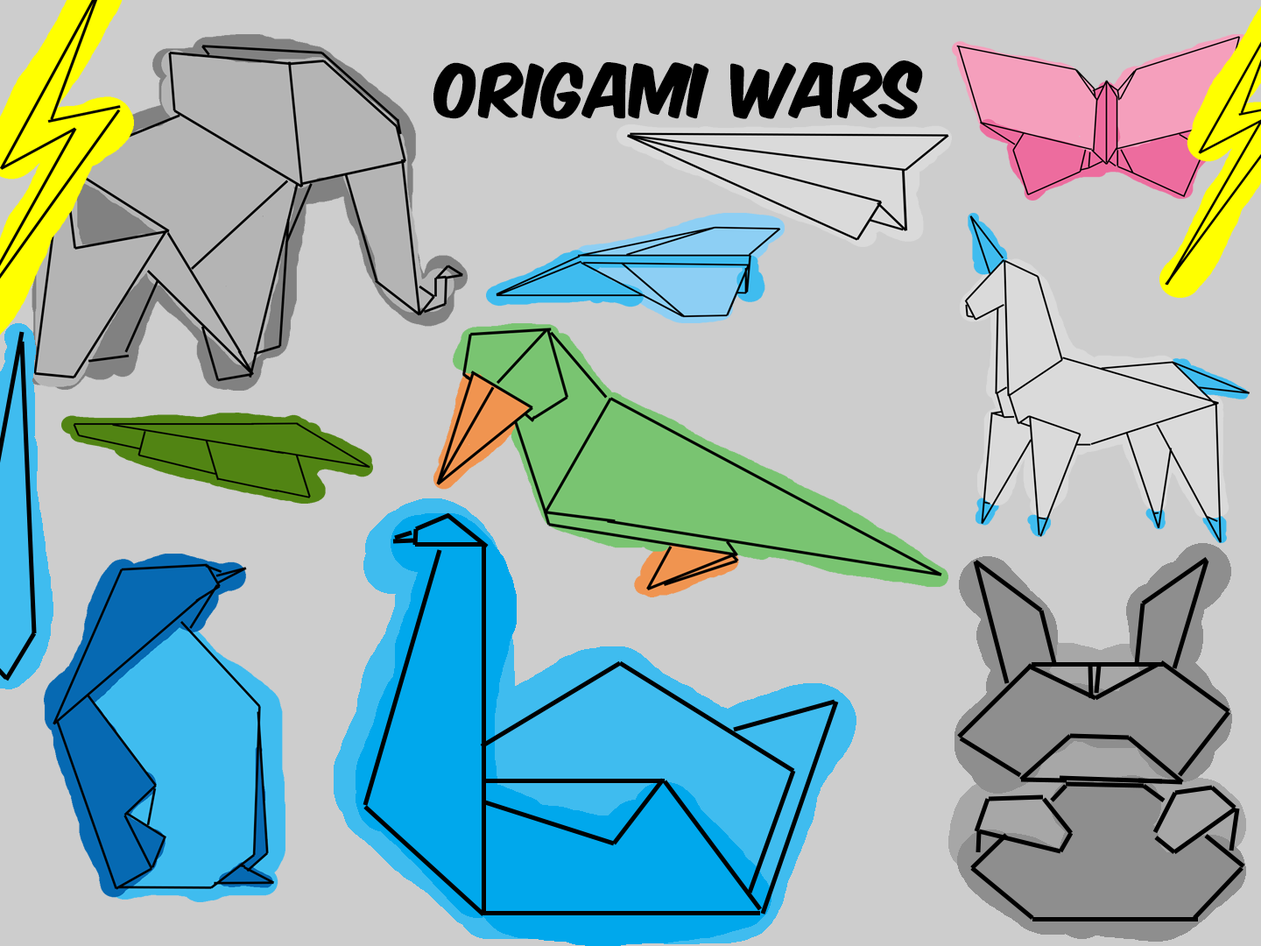
<style>
.page{position:relative;width:1261px;height:946px;background:#cdcdcd}
.page>*{position:absolute;margin:0}
.t1{font:63.1px "KomikaAxis";color:#000000}
</style>
<div class="page">
<p class="t1" style="left:433px;top:60px;width:490px;height:59px">origami wars</p>
</div>
